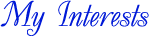
<style>
.page{position:relative;width:149px;height:36px;background:#ffffff}
.page>*{position:absolute;margin:0}
.t1{font:36px "UkrainianDecor";color:#0019d7}
</style>
<div class="page">
<p class="t1" style="left:0px;top:0px;width:149px;height:36px">My Interests</p>
</div>
